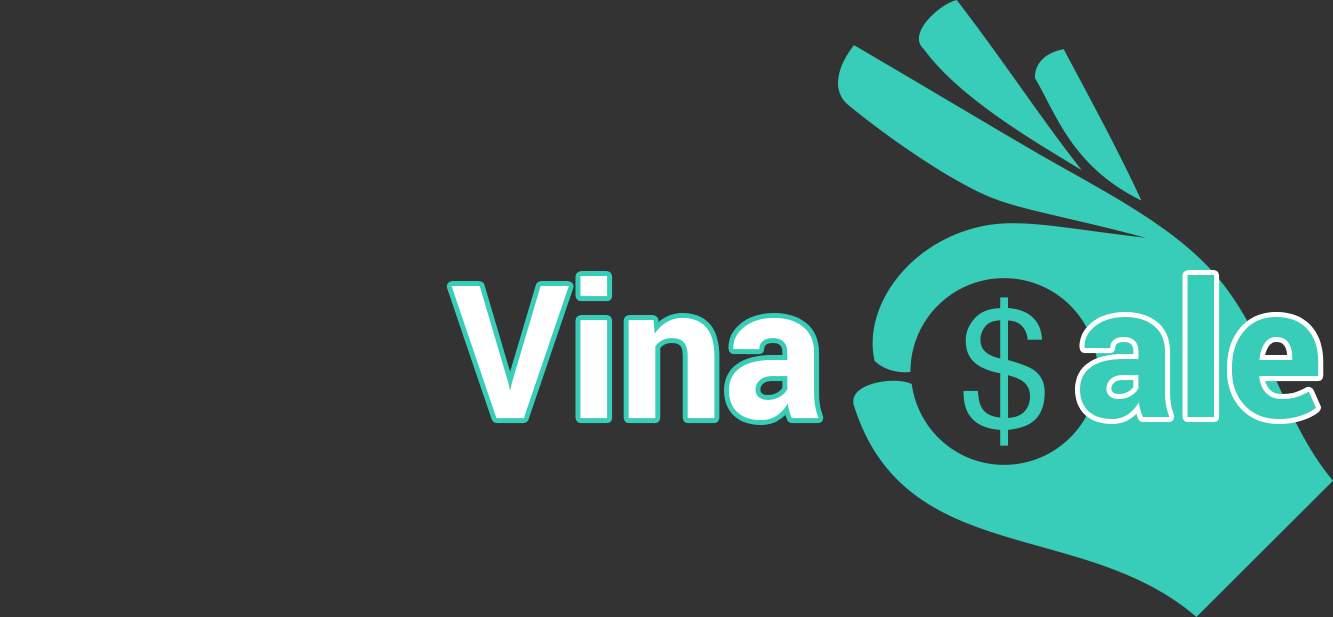
<style>
.page{position:relative;width:1333px;height:617px;background:#333333}
.page>*{position:absolute;margin:0}
.t1{font:185.6px "Roboto-Bold";color:#ffffff}
.t2{font:185.6px "Roboto-Bold";color:#37cdb8}
</style>
<div class="page">
<p class="t1" style="left:451px;top:276px;width:368px;height:144px">Vina</p>
<p class="t2" style="left:1080px;top:275px;width:239px;height:144px">ale</p>
</div>
